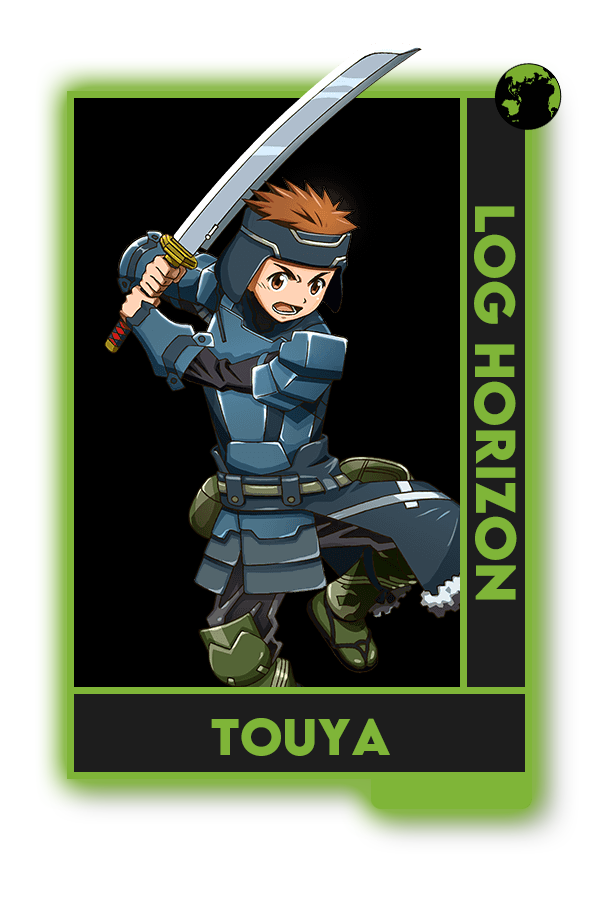
<style>
.page{position:relative;width:600px;height:900px;background:#000000}
.page>*{position:absolute;margin:0}
.t1{font:50px "LEMONMILK-Bold";color:#7fad41}
.t2{font:45.8px "LEMONMILK-Bold";color:#7fad41}
</style>
<div class="page">
<p class="t1" style="left:474px;top:206px;width:43px;height:394px;rotate:90deg">Log Horizon</p>
<p class="t2" style="left:211px;top:718px;width:179px;height:38px">Touya</p>
</div>
